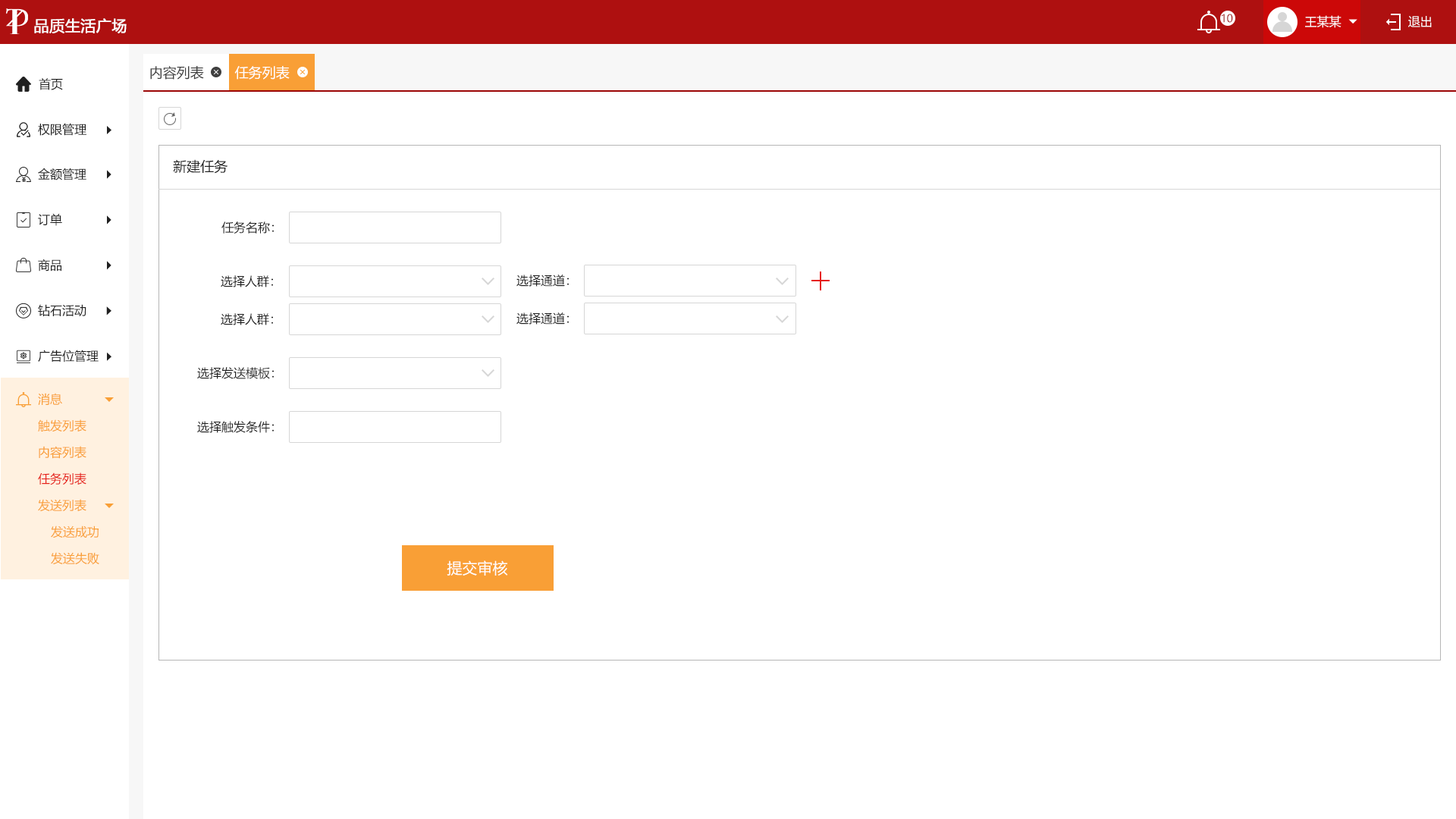
<style>
.page{position:relative;width:1456px;height:819px;background:#ffffff}
.page>*{position:absolute;margin:0}
.t1{font:10.6px "MicrosoftYaHei";color:#9c0606;text-transform:uppercase}
.t2{font:12.1px "MicrosoftYaHei";color:#ffffff;text-transform:uppercase}
.t3{font:15.2px "MicrosoftYaHei";color:#ffffff;text-transform:uppercase;font-weight:bold}
.t4{font:13.6px "MicrosoftYaHei";color:#404040;text-transform:uppercase}
.t5{font:13.6px "MicrosoftYaHei";color:#ffffff;text-transform:uppercase}
.t6{font:12.1px "MicrosoftYaHei";color:#202020;text-transform:uppercase}
.t7{font:13.6px "MicrosoftYaHei";color:#202020;text-transform:uppercase}
.t8{font:12.1px "MicrosoftYaHei";color:#f99f36;text-transform:uppercase}
.t9{font:12.1px "MicrosoftYaHei";color:#e61f18;text-transform:uppercase}
.t10{font:15.2px "MicrosoftYaHei";color:#ffffff}
</style>
<div class="page">
<p class="t1" style="left:1222px;top:14px;width:11px;height:9px">10</p>
<p class="t2" style="left:1305px;top:15px;width:36px;height:13px">王某某</p>
<p class="t2" style="left:1408px;top:16px;width:24px;height:11px">退出</p>
<p class="t3" style="left:34px;top:18px;width:93px;height:15px">品质生活广场</p>
<p class="t4" style="left:150px;top:66px;width:54px;height:14px">内容列表</p>
<p class="t5" style="left:234px;top:66px;width:56px;height:14px">任务列表</p>
<p class="t6" style="left:39px;top:78px;width:24px;height:12px">首页</p>
<p class="t6" style="left:38px;top:123px;width:48px;height:13px">权限管理</p>
<p class="t7" style="left:173px;top:159px;width:55px;height:15px">新建任务</p>
<p class="t6" style="left:38px;top:168px;width:48px;height:12px">金额管理</p>
<p class="t6" style="left:38px;top:213px;width:24px;height:13px">订单</p>
<p class="t6" style="left:221px;top:221px;width:53px;height:13px">任务名称：</p>
<p class="t6" style="left:38px;top:259px;width:23px;height:12px">商品</p>
<p class="t6" style="left:221px;top:275px;width:52px;height:12px">选择人群：</p>
<p class="t6" style="left:516px;top:275px;width:53px;height:12px">选择通道：</p>
<p class="t6" style="left:38px;top:304px;width:48px;height:12px">钻石活动</p>
<p class="t6" style="left:221px;top:313px;width:52px;height:12px">选择人群：</p>
<p class="t6" style="left:516px;top:312px;width:53px;height:13px">选择通道：</p>
<p class="t6" style="left:38px;top:350px;width:61px;height:12px">广告位管理</p>
<p class="t6" style="left:197px;top:367px;width:77px;height:12px">选择发送模板：</p>
<p class="t8" style="left:38px;top:393px;width:24px;height:12px">消息</p>
<p class="t8" style="left:38px;top:419px;width:48px;height:12px">触发列表</p>
<p class="t6" style="left:197px;top:421px;width:77px;height:12px">选择触发条件：</p>
<p class="t8" style="left:39px;top:446px;width:47px;height:13px">内容列表</p>
<p class="t9" style="left:38px;top:472px;width:48px;height:13px">任务列表</p>
<p class="t8" style="left:38px;top:499px;width:48px;height:12px">发送列表</p>
<p class="t8" style="left:51px;top:526px;width:48px;height:12px">发送成功</p>
<p class="t8" style="left:51px;top:552px;width:48px;height:13px">发送失败</p>
<p class="t10" style="left:447px;top:560px;width:61px;height:16px">提交审核</p>
</div>
